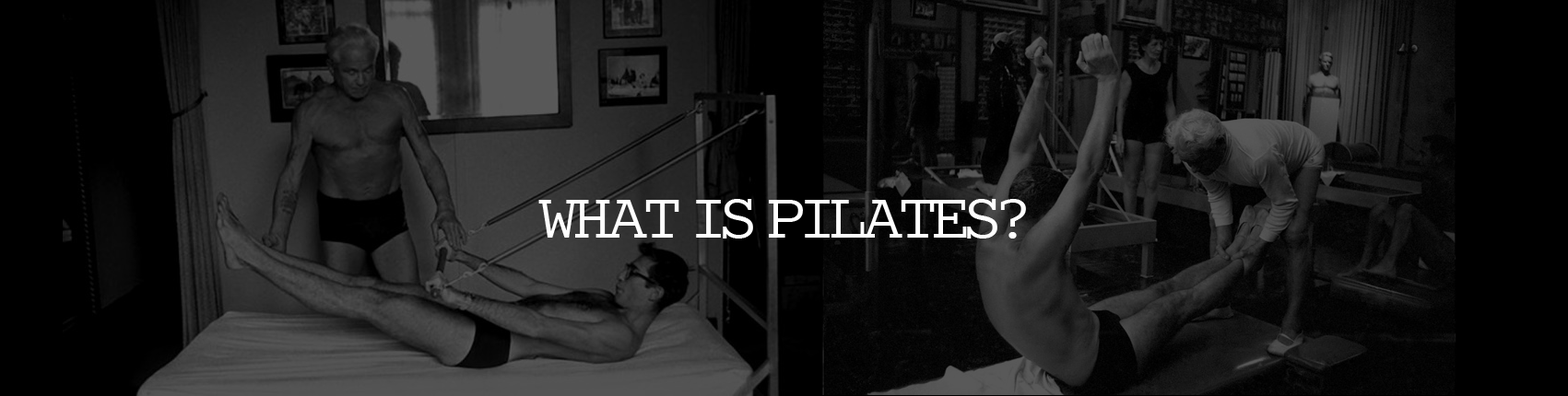
<style>
.page{position:relative;width:1568px;height:396px;background:#000000}
.page>*{position:absolute;margin:0}
.t1{font:66.4px "CumberlandAMT";letter-spacing:-0.05em;color:#ffffff}
</style>
<div class="page">
<p class="t1" style="left:538px;top:199px;width:488px;height:40px">WHAT IS PILATES?</p>
</div>
